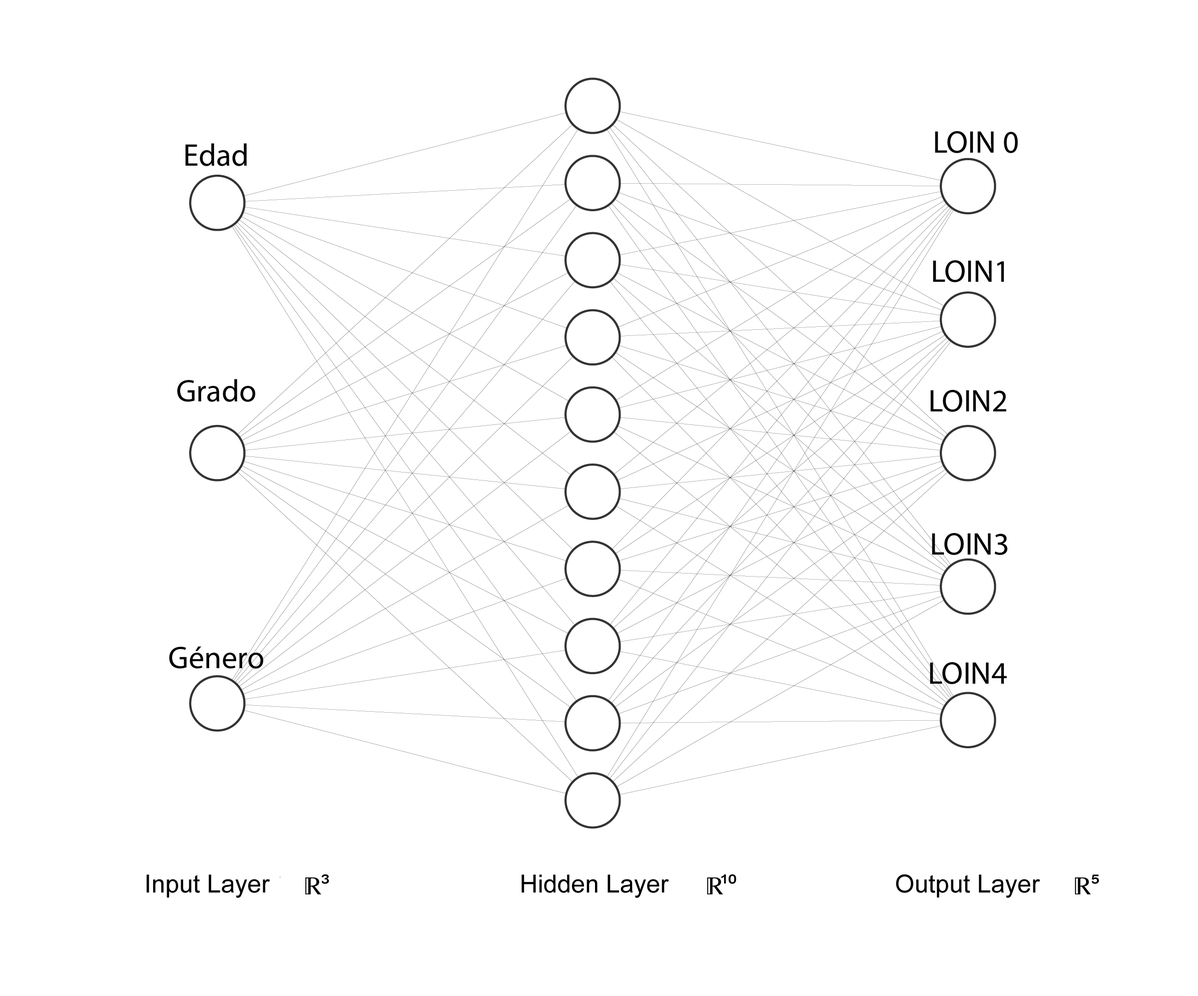
<style>
.page{position:relative;width:1198px;height:996px;background:#ffffff}
.page>*{position:absolute;margin:0}
.t1{font:31.3px "MyriadPro-Regular";color:#000000}
</style>
<div class="page">
<p class="t1" style="left:935px;top:131px;width:83px;height:22px">LOIN 0</p>
<p class="t1" style="left:185px;top:143px;width:62px;height:23px">Edad</p>
<p class="t1" style="left:933px;top:260px;width:71px;height:22px">LOIN1</p>
<p class="t1" style="left:177px;top:379px;width:78px;height:23px">Grado</p>
<p class="t1" style="left:930px;top:390px;width:76px;height:22px">LOIN2</p>
<p class="t1" style="left:932px;top:533px;width:75px;height:22px">LOIN3</p>
<p class="t1" style="left:169px;top:646px;width:94px;height:22px">Género</p>
<p class="t1" style="left:930px;top:662px;width:77px;height:22px">LOIN4</p>
</div>
